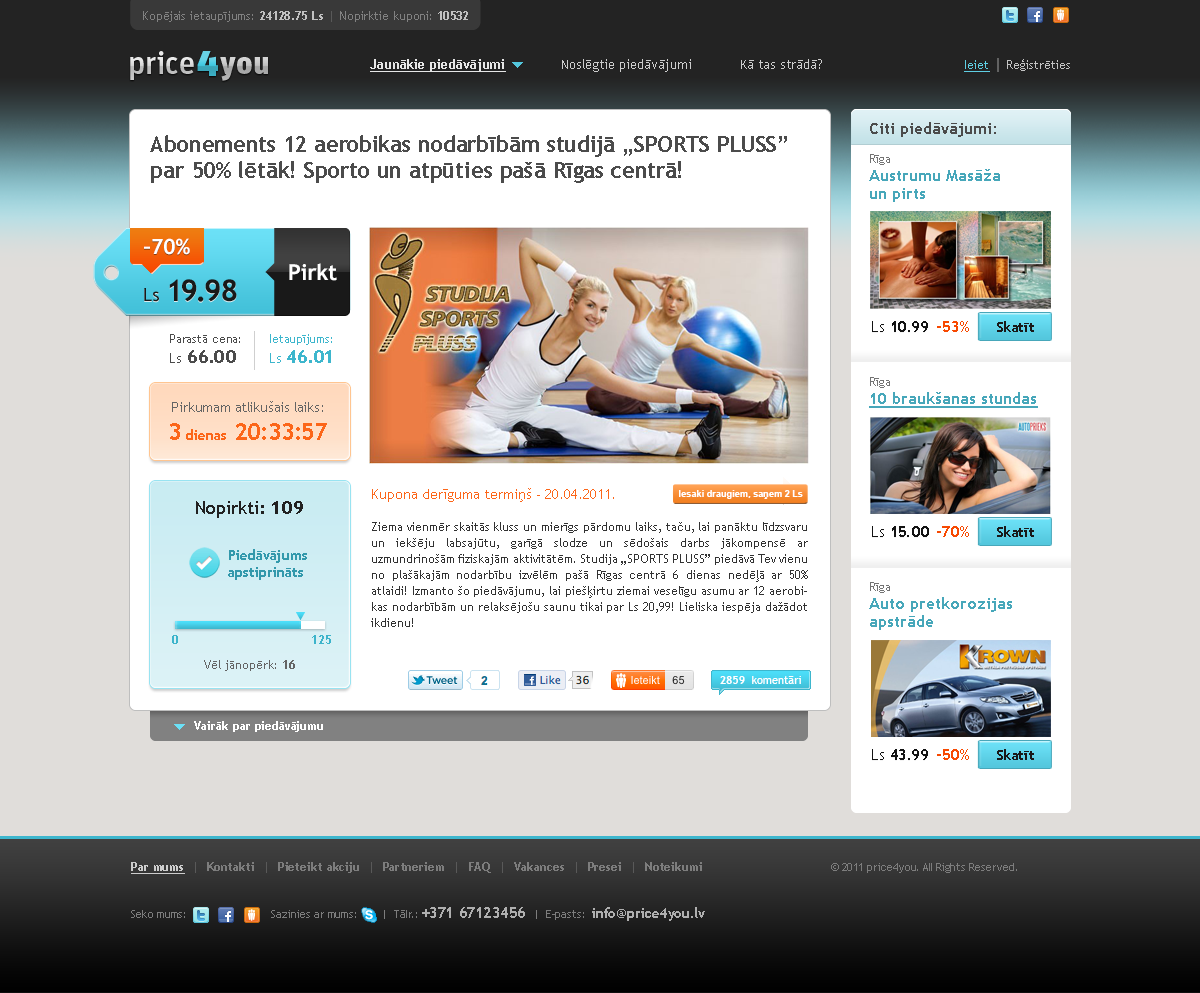
<style>
.page{position:relative;width:1200px;height:993px;background:#ffffff}
.page>*{position:absolute;margin:0}
.t1{font:12px "TrebuchetMS";color:#818181}
.t2{font:11px "TrebuchetMS-Bold";color:#7d7d7d}
.t3{font:12px "TrebuchetMS-Bold";color:#c1c1c1}
.t4{font:12px "TrebuchetMS-Bold";color:#595959}
.t5{font:13px "TrebuchetMS";color:#cdcdcd}
.t6{font:13px "TrebuchetMS-Bold";color:#e6e6e6;text-decoration:underline}
.t7{font:12px "TrebuchetMS";color:#c8c8c8}
.t8{font:12px "TrebuchetMS";color:#61d2e7;text-decoration:underline}
.t9{font:18px "TrebuchetMS";color:#646464}
.t10{font:16px "TrebuchetMS-Bold";color:#4b4b4b}
.t11{font:22px/26px "TrebuchetMS-Bold";color:#4b4b4b}
.t12{font:21px "TrebuchetMS-Bold";color:#ffffff}
.t13{font:22px "TrebuchetMS-Bold";color:#ffffff}
.t14{font:30px "TrebuchetMS-Bold";color:#191919}
.t15{font:18px "TrebuchetMS";color:#191919}
.t16{font:16px "TrebuchetMS-Bold";color:#131313}
.t17{font:16px "TrebuchetMS";color:#131313}
.t18{font:16px "TrebuchetMS-Bold";color:#f74901}
.t19{font:14px "TrebuchetMS-Bold";color:#191919}
.t20{font:12px/20px "TrebuchetMS";color:#4b4b4b}
.t21{font:14px/20px "TrebuchetMS";color:#4b4b4b}
.t22{font:18px/20px "TrebuchetMS-Bold";color:#4b4b4b}
.t23{font:12px/20px "TrebuchetMS";color:#3db6cd}
.t24{font:14px/20px "TrebuchetMS";color:#3db6cd}
.t25{font:18px/20px "TrebuchetMS-Bold";color:#3db6cd}
.t26{font:14px/14px "TrebuchetMS";color:#646464}
.t27{font:24px/14px "TrebuchetMS-Bold";color:#fc6619}
.t28{font:14px/14px "TrebuchetMS-Bold";color:#fc6619}
.t29{font:12px/16px "TrebuchetMS";color:#323232}
.t30{font:14px/16px "TrebuchetMS";color:#fc6619}
.t31{font:9px "Arial-BoldMT";color:#ffffff}
.t32{font:18px "TrebuchetMS";color:#212121}
.t33{font:18px "TrebuchetMS-Bold";color:#212121}
.t34{font:14px "TrebuchetMS-Bold";color:#3399ac}
.t35{font:12px "TrebuchetMS-Bold";color:#3cb4cb}
.t36{font:12px "TrebuchetMS";color:#646464}
.t37{font:12px "TrebuchetMS-Bold";color:#646464}
.t38{font:11px "TrebuchetMS";color:#ffffff}
.t39{font:11px "TrebuchetMS-Bold";letter-spacing:-0.01em;color:#ffffff}
.t40{font:12px "TrebuchetMS-Bold";color:#ffffff}
.t41{font:11px "TrebuchetMS";color:#7d7d7d}
.t42{font:12px "TrebuchetMS-Bold";color:#cdcdcd;text-decoration:underline}
.t43{font:12px "TrebuchetMS-Bold";color:#7d7d7d}
.t44{font:11px/18px "TrebuchetMS";color:#7d7d7d}
.t45{font:11px/14px "TrebuchetMS";color:#7d7d7d}
.t46{font:16px "TrebuchetMS-Bold";color:#afafaf}
.t47{font:14px "TrebuchetMS-Bold";color:#afafaf}
</style>
<div class="page">
<p class="t1" style="left:143px;top:11px;width:325px;height:11px"><span class="t2"><br></span>Kopējais ietaupījums: <span class="t3">24128.75 Ls </span><span class="t4">| </span>Nopirktie kuponi: <span class="t3">10532</span></p>
<p class="t5" style="left:370px;top:59px;width:452px;height:13px"><span class="t6">Jaunākie piedāvājumi              </span>Noslēgtie piedāvājumi            Kā tas strādā?</p>
<p class="t7" style="left:964px;top:58px;width:106px;height:14px;opacity:0.97"><span class="t8">Ieiet </span><span class="t9">|</span> Reģistrēties</p>
<p class="t10" style="left:870px;top:122px;width:126px;height:15px">Citi piedāvājumi:</p>
<p class="t11" style="left:150px;top:135px;width:637px;height:48px">Abonements 12 aerobikas nodarbībām studijā „SPORTS PLUSS”<br>par 50% lētāk! Sporto un atpūties pašā Rīgas centrā!</p>
<p class="t12" style="left:144px;top:238px;width:46px;height:17px">–70%</p>
<p class="t13" style="left:289px;top:263px;width:48px;height:18px">Pirkt</p>
<p class="t14" style="left:144px;top:279px;width:93px;height:23px"><span class="t15">Ls </span>19.98</p>
<p class="t16" style="left:872px;top:321px;width:56px;height:11px"><span class="t17">Ls </span>10.99</p>
<p class="t18" style="left:937px;top:321px;width:32px;height:11px">-53%</p>
<p class="t19" style="left:997px;top:321px;width:37px;height:11px">Skatīt</p>
<p class="t20" style="left:170px;top:334px;width:70px;height:29px">Parastā cena:<br><span class="t21">Ls</span><span class="t22"> 66.00</span></p>
<p class="t23" style="left:270px;top:334px;width:62px;height:29px">Ietaupījums:<br><span class="t24">Ls </span><span class="t25">46.01</span></p>
<p class="t26" style="left:170px;top:401px;width:157px;height:39px;text-align:center">Pirkumam atlikušais laiks:<br><br><span class="t27">3 </span><span class="t28">dienas </span><span class="t27">20:33:57</span></p>
<p class="t29" style="left:371px;top:488px;width:437px;height:139px"><span class="t30">Kupona derīguma termiņš - 20.04.2011.<br></span> <br>Ziema vienmēr skaitās kluss un mierīgs pārdomu laiks, taču, lai panāktu līdzsvaru un iekšēju labsajūtu, garīgā slodze un sēdošais darbs jākompensē ar uzmundrinošām fiziskajām aktivitātēm. Studija „SPORTS PLUSS” piedāvā Tev vienu no plašākajām nodarbību izvēlēm pašā Rīgas centrā 6 dienas nedēļā ar 50% atlaidi! Izmanto šo piedāvājumu, lai piešķirtu ziemai veselīgu asumu ar 12 aerobikas nodarbībām un relaksējošu saunu tikai par Ls 20,99! Lieliska iespēja dažādot ikdienu!</p>
<p class="t31" style="left:679px;top:490px;width:124px;height:9px">Iesaki draugiem, saņem 2 Ls</p>
<p class="t32" style="left:196px;top:501px;width:107px;height:17px">Nopirkti:<span class="t33"> 109</span></p>
<p class="t16" style="left:872px;top:526px;width:57px;height:11px"><span class="t17">Ls </span>15.00</p>
<p class="t18" style="left:937px;top:526px;width:32px;height:11px">-70%</p>
<p class="t19" style="left:997px;top:526px;width:37px;height:11px">Skatīt</p>
<p class="t34" style="left:228px;top:549px;width:79px;height:31px">Piedāvājums<br>apstiprināts</p>
<p class="t35" style="left:172px;top:635px;width:159px;height:9px">0                                 125</p>
<p class="t36" style="left:204px;top:660px;width:91px;height:11px">Vēl jānopērk: <span class="t37">16</span></p>
<p class="t38" style="left:720px;top:676px;width:81px;height:8px"><span class="t39">2859  </span>komentāri</p>
<p class="t40" style="left:194px;top:721px;width:129px;height:11px">Vairāk par piedāvājumu</p>
<p class="t16" style="left:872px;top:749px;width:56px;height:11px"><span class="t17">Ls </span>43.99</p>
<p class="t18" style="left:937px;top:749px;width:32px;height:11px">-50%</p>
<p class="t19" style="left:997px;top:749px;width:37px;height:11px">Skatīt</p>
<p class="t41" style="left:131px;top:862px;width:886px;height:59px"><span class="t42">Par mums  </span><span class="t4">|</span><span class="t43">  Kontakti  </span><span class="t4">|</span><span class="t43">  Pieteikt akciju  </span><span class="t4">|</span><span class="t43">  Partneriem  </span><span class="t4">|  </span><span class="t43">FAQ  </span><span class="t4">| </span><span class="t43"> Vakances  </span><span class="t4">| </span><span class="t43"> Presei  </span><span class="t4">|</span><span class="t43">  Noteikumi                                </span><span class="t44">© 2011 price4you. All Rights Reserved.<br><br><br></span><span class="t45">Seko m</span>ums:                            Sazinies ar mums:        |  Tālr.: <span class="t46">+371 67123456 </span> |  E-pasts:  <span class="t47">info@price4you.lv</span></p>
</div>
